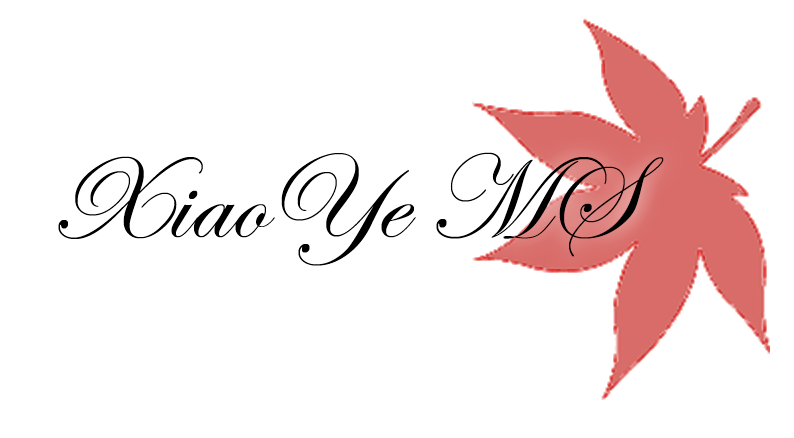
<style>
.page{position:relative;width:794px;height:438px;background:#ffffff}
.page>*{position:absolute;margin:0}
.t1{font:120px "EdwardianScriptITC";color:#000000}
</style>
<div class="page">
<p class="t1" style="left:58px;top:152px;width:606px;height:114px">XiaoYe MS</p>
</div>
